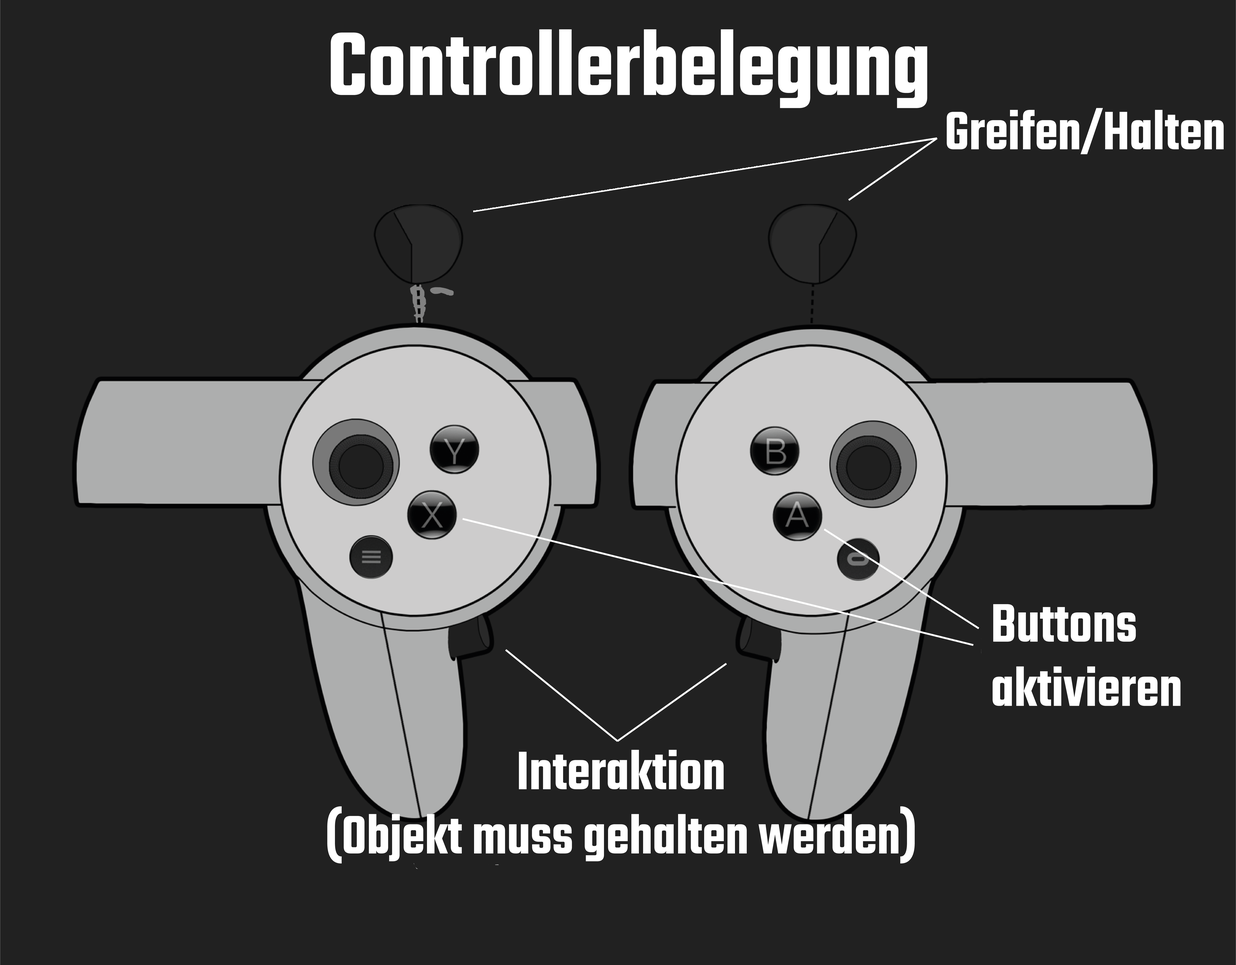
<style>
.page{position:relative;width:1236px;height:965px;background:#212121}
.page>*{position:absolute;margin:0}
.t1{font:98.1px "Teko-SemiBold";color:#ffffff;scale:0.91 1}
.t2{font:58.9px "Teko-SemiBold";color:#ffffff;scale:0.91 1}
</style>
<div class="page">
<p class="t1" style="left:331px;top:29px;width:596px;height:79px">Controllerbelegung</p>
<p class="t2" style="left:947px;top:108px;width:277px;height:46px">Greifen/Halten</p>
<p class="t2" style="left:992px;top:604px;width:189px;height:102px">Buttons<br>aktivieren</p>
<p class="t2" style="left:327px;top:749px;width:588px;height:114px;text-align:center">Interaktion<br>(Objekt muss gehalten werden)</p>
</div>
